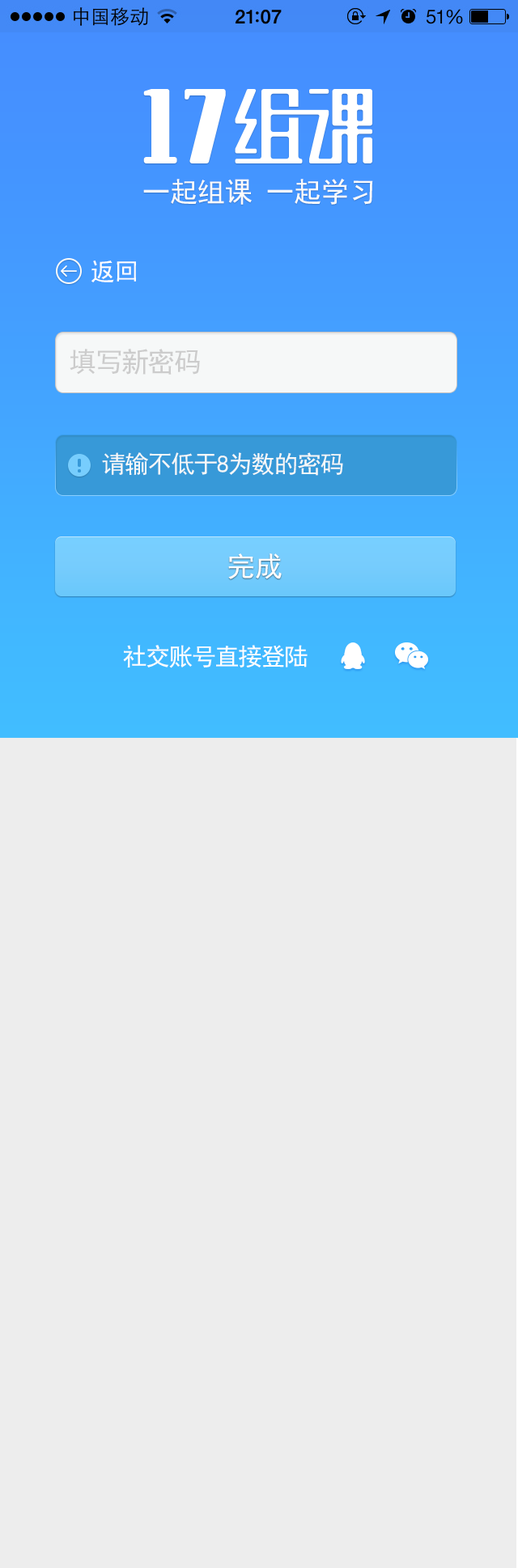
<style>
.page{position:relative;width:518px;height:1568px;background:#ededed}
.page>*{position:absolute;margin:0}
.t1{font:27.5px "SimHei";color:#fbfbfb}
.t2{font:24.3px "SimHei";color:#fefefe}
.t3{font:27.5px "SimHei";letter-spacing:-0.05em;color:#cccccc}
.t4{font:24.3px "SimHei";letter-spacing:-0.05em;color:#f6f8f8}
.t5{font:27.5px "SimHei";color:#fefefe}
.t6{font:24.3px "SimHei";letter-spacing:-0.05em;color:#fefefe}
</style>
<div class="page">
<p class="t1" style="left:143px;top:178px;width:230px;height:27px">一起组课 一起学习</p>
<p class="t2" style="left:91px;top:261px;width:45px;height:21px">返回</p>
<p class="t3" style="left:70px;top:349px;width:130px;height:26px">填写新密码</p>
<p class="t4" style="left:102px;top:452px;width:241px;height:24px">请输不低于8为数的密码</p>
<p class="t5" style="left:228px;top:553px;width:54px;height:26px">完成</p>
<p class="t6" style="left:123px;top:645px;width:184px;height:23px">社交账号直接登陆</p>
</div>
